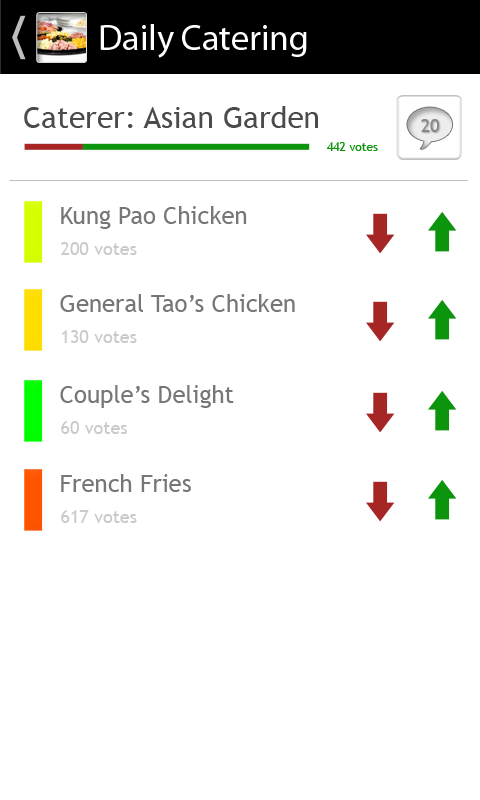
<style>
.page{position:relative;width:480px;height:800px;background:#ffffff}
.page>*{position:absolute;margin:0}
.t1{font:36px "MyriadPro-Regular";color:#ffffff}
.t2{font:30px "TrebuchetMS";color:#4b4b4b}
.t3{font:18px "TrebuchetMS";color:#878787}
.t4{font:12px "TrebuchetMS";color:#0c940c}
.t5{font:24px "TrebuchetMS";color:#777777}
.t6{font:18px "TrebuchetMS";color:#cacaca}
</style>
<div class="page">
<p class="t1" style="left:100px;top:24px;width:207px;height:34px">Daily Catering</p>
<p class="t2" style="left:24px;top:106px;width:294px;height:22px">Caterer: Asian Garden</p>
<p class="t3" style="left:421px;top:119px;width:18px;height:13px">20</p>
<p class="t4" style="left:327px;top:142px;width:51px;height:9px">442 votes</p>
<p class="t5" style="left:61px;top:206px;width:186px;height:23px">Kung Pao Chicken</p>
<p class="t6" style="left:61px;top:242px;width:76px;height:13px">200 votes</p>
<p class="t5" style="left:60px;top:294px;width:235px;height:18px">General Tao’s Chicken</p>
<p class="t6" style="left:62px;top:330px;width:75px;height:13px">130 votes</p>
<p class="t5" style="left:60px;top:385px;width:174px;height:23px">Couple’s Delight</p>
<p class="t6" style="left:61px;top:421px;width:66px;height:13px">60 votes</p>
<p class="t5" style="left:61px;top:474px;width:130px;height:18px">French Fries</p>
<p class="t6" style="left:61px;top:510px;width:76px;height:13px">617 votes</p>
</div>
